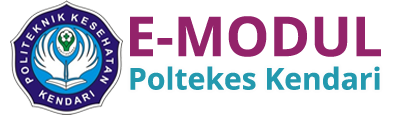
<style>
.page{position:relative;width:396px;height:115px;background:#ffffff}
.page>*{position:absolute;margin:0}
.t1{font:55px "OpenSans-Bold";color:#93236a}
.t2{font:30px "OpenSans-Bold";color:#2399ae}
.t3{font:24px "OpenSans-Regular";color:#df9c19}
</style>
<div class="page">
<p class="t1" style="left:130px;top:16px;width:251px;height:41px">E-MODUL</p>
<p class="t2" style="left:130px;top:66px;width:250px;height:24px"><span class="t3"><br></span>Poltekes Kendari</p>
</div>
